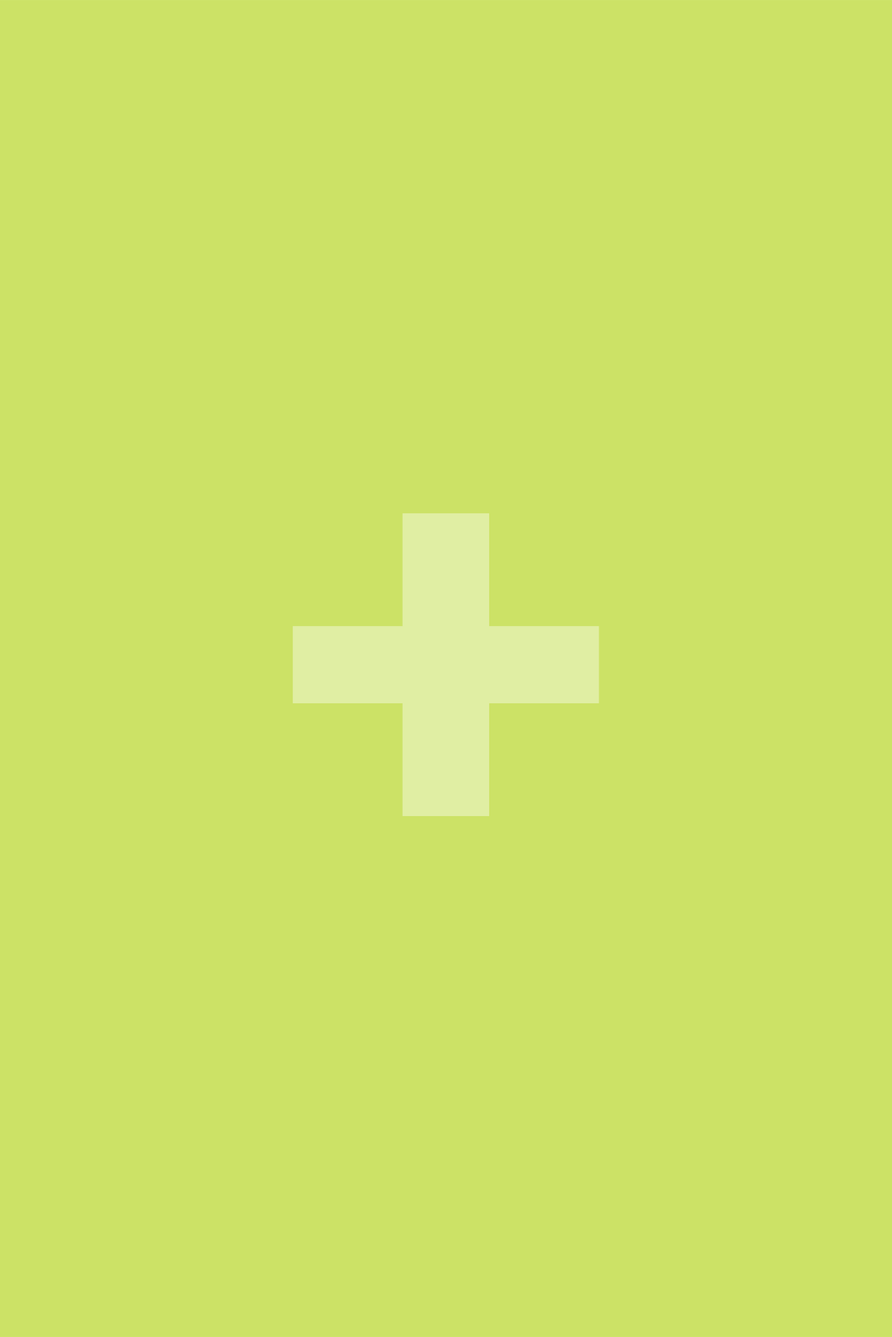
<style>
.page{position:relative;width:892px;height:1337px;background:#cce266}
.page>*{position:absolute;margin:0}
.t1{font:626.9px "Montserrat-Bold";letter-spacing:0.1em;color:#e0eea3}
</style>
<div class="page">
<p class="t1" style="left:293px;top:513px;width:306px;height:303px">+</p>
</div>
